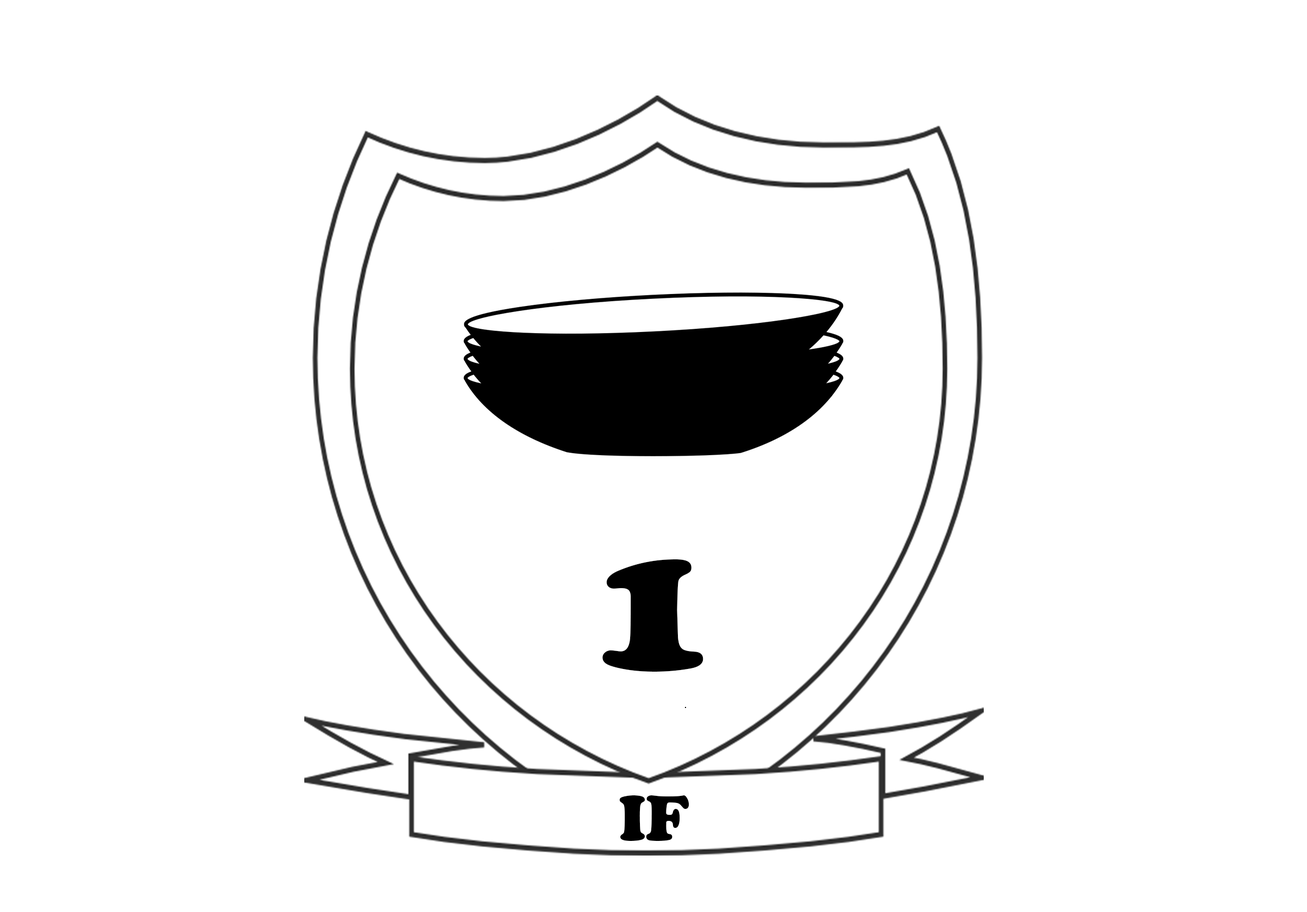
<style>
.page{position:relative;width:1307px;height:912px;background:#ffffff}
.page>*{position:absolute;margin:0}
.t1{font:195.3px "CooperBlack";color:#000000}
.t2{font:65.1px "CooperBlack";color:#000000}
</style>
<div class="page">
<p class="t1" style="left:603px;top:559px;width:101px;height:113px">1</p>
<p class="t2" style="left:620px;top:795px;width:70px;height:46px">IF</p>
</div>
